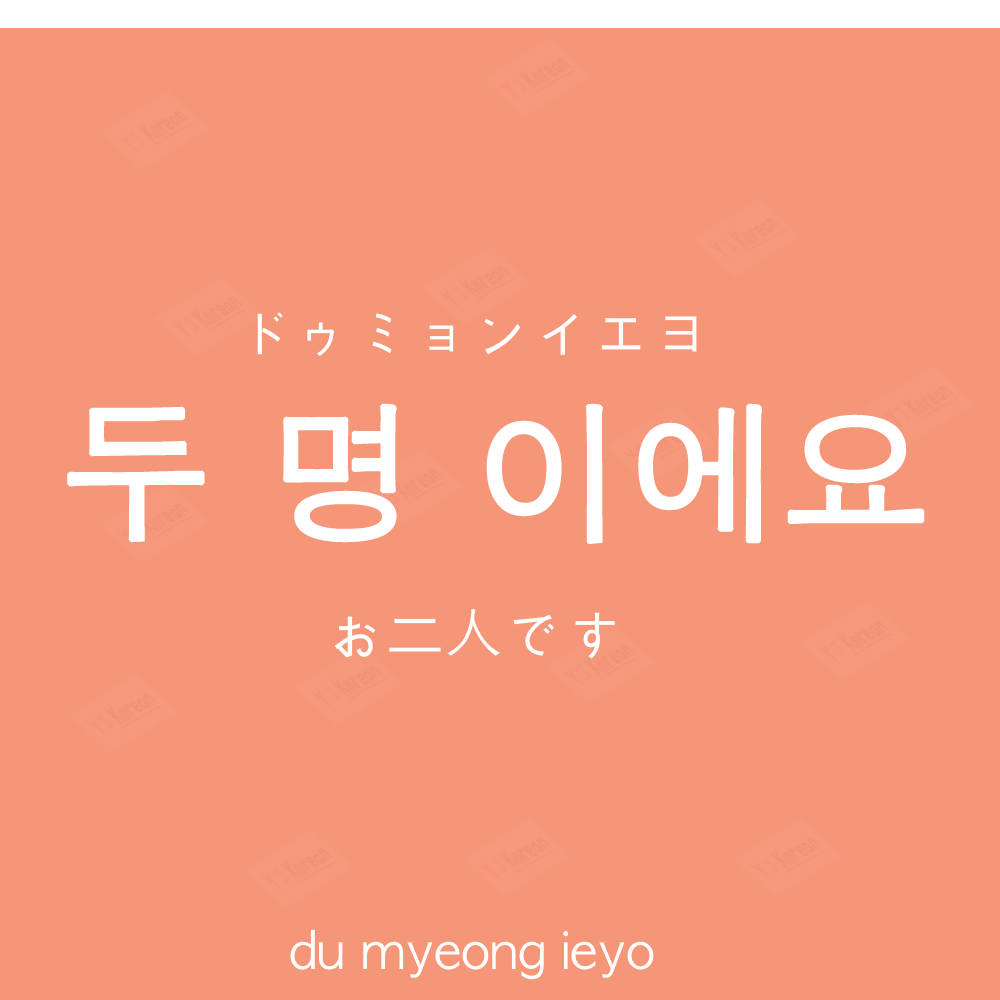
<style>
.page{position:relative;width:1000px;height:1000px;background:#f69679}
.page>*{position:absolute;margin:0}
.t1{font:60px "AppleGothic";color:#ffffff}
.t2{font:150px "AppleGothic";color:#ffffff;font-weight:bold}
.t3{font:50px "AppleGothic";color:#ffffff}
</style>
<div class="page">
<p class="t1" style="left:257px;top:312px;width:440px;height:44px">ドゥミョンイエヨ</p>
<p class="t2" style="left:67px;top:403px;width:858px;height:142px">두 명 이에요</p>
<p class="t1" style="left:334px;top:609px;width:281px;height:50px">お二人です</p>
<p class="t3" style="left:290px;top:929px;width:364px;height:51px">du myeong ieyo</p>
</div>
